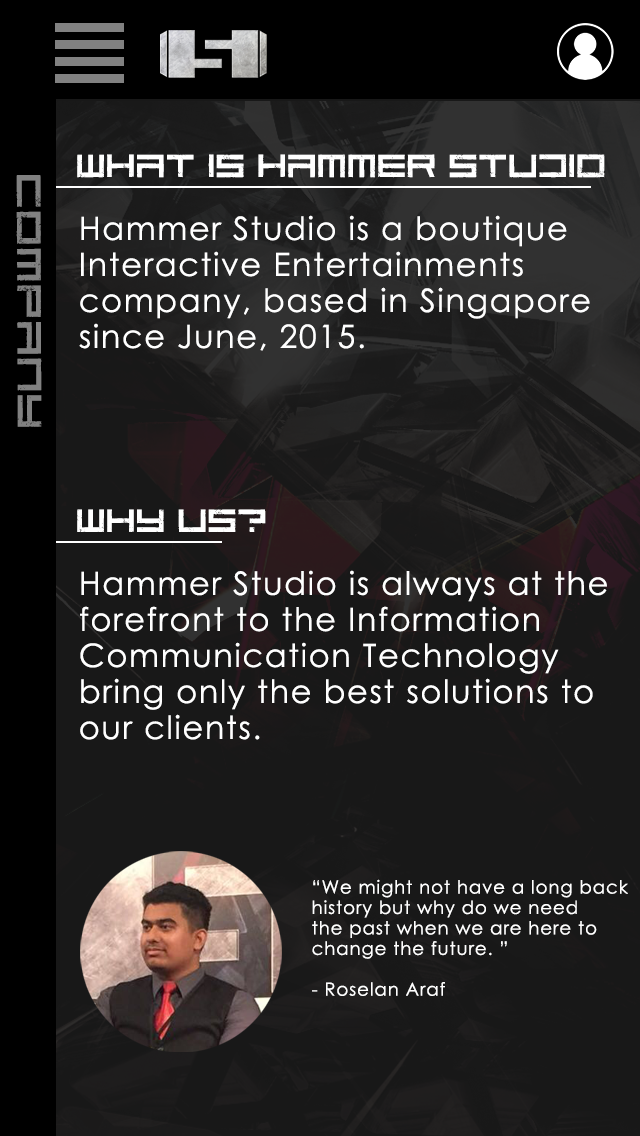
<style>
.page{position:relative;width:640px;height:1136px;background:#181818}
.page>*{position:absolute;margin:0}
.t1{font:40px "CodePredators-Regular";letter-spacing:0.05em;color:#ffffff}
.t2{font:42px "CodePredators-Regular";letter-spacing:0.075em;color:#818181;scale:1.13 1}
.t3{font:32px/36px "CenturyGothic";letter-spacing:0.05em;color:#ffffff}
.t4{font:18.2px/20.4px "CenturyGothic";letter-spacing:0.05em;color:#ffffff}
</style>
<div class="page">
<p class="t1" style="left:77px;top:154px;width:528px;height:24px">What is hammer studio</p>
<p class="t2" style="left:16px;top:175px;width:26px;height:252px;rotate:90deg">company</p>
<p class="t3" style="left:79px;top:215px;width:511px;height:136px;text-align:right">Hammer Studio is a boutique<br>Interactive Entertainments <br>company, based in Singapore <br>since June, 2015.</p>
<p class="t1" style="left:77px;top:509px;width:189px;height:23px">why us?</p>
<p class="t3" style="left:80px;top:570px;width:527px;height:170px;text-align:right">Hammer Studio is always at the <br>forefront to the Information <br>Communication Technology <br>bring only the best solutions to <br>our clients.</p>
<p class="t4" style="left:312px;top:879px;width:316px;height:117px;text-align:right">“We might not have a long back <br>history but why do we need <br>the past when we are here to <br>change the future. ”<br><br>- Roselan Araf</p>
</div>
